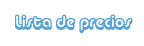
<style>
.page{position:relative;width:144px;height:46px;background:#ffffff}
.page>*{position:absolute;margin:0}
.t1{font:16px "AlbaSuper";color:#57a3d6}
</style>
<div class="page">
<p class="t1" style="left:15px;top:14px;width:118px;height:20px">Lista de precios</p>
</div>
